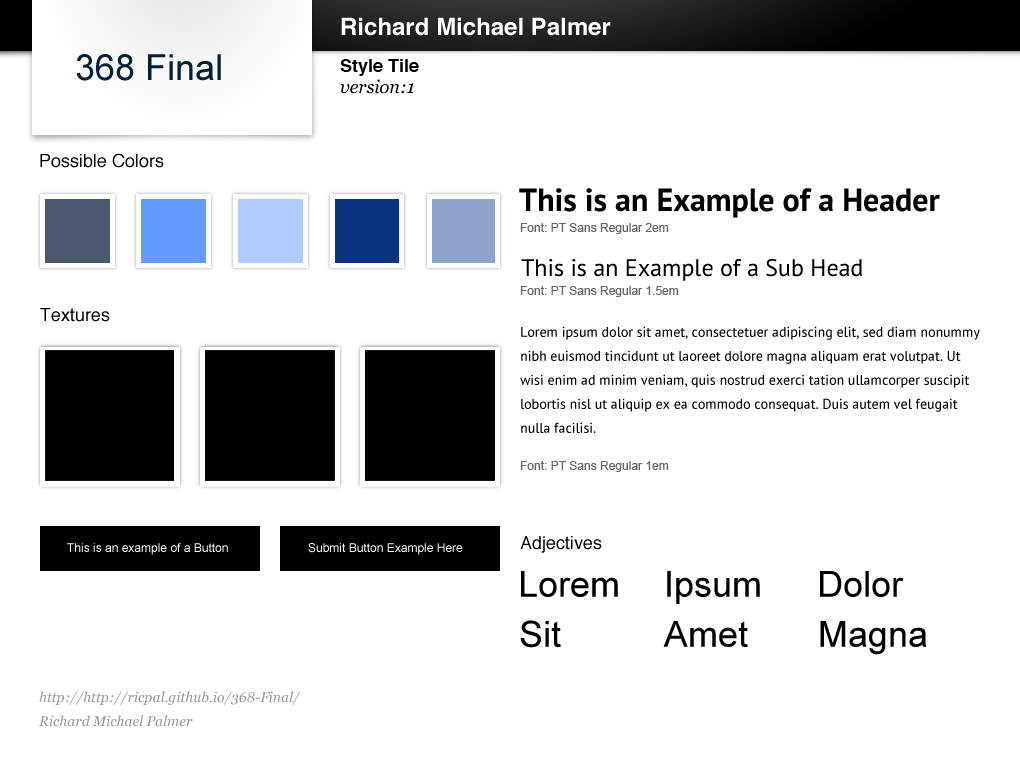
<style>
.page{position:relative;width:1020px;height:760px;background:#ffffff}
.page>*{position:absolute;margin:0}
.t1{font:24px "Helvetica-Bold";color:#ffffff}
.t2{font:36px "ArialMT";color:#002035}
.t3{font:18px "Helvetica-Bold";color:#000000}
.t4{font:18px "Georgia-Italic";color:#000000}
.t5{font:18px "Helvetica";color:#000000}
.t6{font:32px "PTSans-Bold";color:#000000}
.t7{font:12px "ArialMT";color:#666666}
.t8{font:24px "PTSans-Regular";color:#000000}
.t9{font:14px/24px "PTSans-Regular";color:#000000}
.t10{font:12px "ArialMT";color:#ffffff}
.t11{font:36px "ArialMT";color:#000000}
.t12{font:14px/24px "Georgia-Italic";color:#999999}
</style>
<div class="page">
<p class="t1" style="left:341px;top:17px;width:270px;height:19px">Richard Michael Palmer</p>
<p class="t2" style="left:76px;top:54px;width:145px;height:27px">368 Final</p>
<p class="t3" style="left:340px;top:59px;width:79px;height:17px">Style Tile</p>
<p class="t4" style="left:340px;top:79px;width:74px;height:15px">version:1</p>
<p class="t5" style="left:40px;top:153px;width:124px;height:15px">Possible Colors</p>
<p class="t6" style="left:519px;top:188px;width:421px;height:30px">This is an Example of a Header</p>
<p class="t7" style="left:520px;top:223px;width:149px;height:11px">Font: PT Sans Regular 2em</p>
<p class="t8" style="left:521px;top:259px;width:341px;height:22px">This is an Example of a Sub Head</p>
<p class="t7" style="left:520px;top:286px;width:159px;height:11px">Font: PT Sans Regular 1.5em</p>
<p class="t5" style="left:40px;top:308px;width:70px;height:14px">Textures</p>
<p class="t9" style="left:520px;top:326px;width:460px;height:107px">Lorem ipsum dolor sit amet, consectetuer adipiscing elit, sed diam nonummy nibh euismod tincidunt ut laoreet dolore magna aliquam erat volutpat. Ut wisi enim ad minim veniam, quis nostrud exerci tation ullamcorper suscipit lobortis nisl ut aliquip ex ea commodo consequat. Duis autem vel feugait nulla facilisi.</p>
<p class="t7" style="left:520px;top:461px;width:149px;height:11px">Font: PT Sans Regular 1em</p>
<p class="t10" style="left:67px;top:543px;width:161px;height:12px">This is an example of a Button</p>
<p class="t10" style="left:308px;top:543px;width:155px;height:12px">Submit Button Example Here</p>
<p class="t5" style="left:520px;top:536px;width:82px;height:17px">Adjectives</p>
<p class="t11" style="left:521px;top:571px;width:97px;height:26px">Lorem</p>
<p class="t11" style="left:667px;top:571px;width:93px;height:33px">Ipsum</p>
<p class="t11" style="left:820px;top:571px;width:84px;height:26px">Dolor</p>
<p class="t11" style="left:520px;top:620px;width:41px;height:28px">Sit</p>
<p class="t11" style="left:663px;top:621px;width:85px;height:26px">Amet</p>
<p class="t11" style="left:820px;top:621px;width:107px;height:34px">Magna</p>
<p class="t12" style="left:39px;top:691px;width:262px;height:36px">http://http://ricpal.github.io/368-Final/<br>Richard Michael Palmer</p>
</div>
